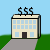
<style>
.page{position:relative;width:50px;height:50px;background:#94d7f5}
.page>*{position:absolute;margin:0}
.t1{font:18px "MyriadPro-Regular";color:#000000}
</style>
<div class="page">
<p class="t1" style="left:18px;top:7px;width:16px;height:9px">$$$</p>
</div>
